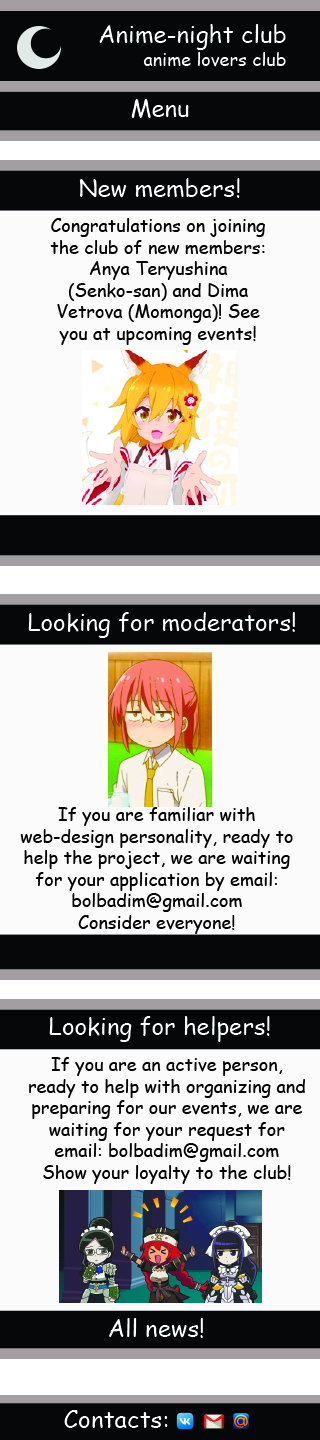
<style>
.page{position:relative;width:320px;height:1440px;background:#fbfbfb}
.page>*{position:absolute;margin:0}
.t1{font:24px "ComicSansMS";color:#ffffff}
.t2{font:18px "ComicSansMS";color:#ffffff}
.t3{font:18px "ComicSansMS";color:#000000}
</style>
<div class="page">
<p class="t1" style="left:99px;top:24px;width:187px;height:26px">Anime-night club</p>
<p class="t2" style="left:143px;top:52px;width:143px;height:15px">anime lovers club</p>
<p class="t1" style="left:131px;top:99px;width:58px;height:19px">Menu</p>
<p class="t1" style="left:79px;top:178px;width:161px;height:20px">New members!</p>
<p class="t3" style="left:50px;top:218px;width:215px;height:127px;text-align:center">Congratulations on joining the club of new members: Anya Teryushina (Senko-san) and Dima Vetrova (Momonga)! See you at upcoming events!</p>
<p class="t1" style="left:28px;top:612px;width:267px;height:26px">Looking for moderators!</p>
<p class="t3" style="left:20px;top:807px;width:273px;height:127px;text-align:center">If you are familiar with web-design personality, ready to help the project, we are waiting for your application by email: bolbadim@gmail.com<br>Consider everyone!</p>
<p class="t1" style="left:49px;top:1016px;width:221px;height:26px">Looking for helpers!</p>
<p class="t3" style="left:29px;top:1057px;width:276px;height:127px;text-align:center">If you are an active person, ready to help with organizing and preparing for our events, we are waiting for your request for email: bolbadim@gmail.com<br>Show your loyalty to the club!</p>
<p class="t1" style="left:109px;top:1318px;width:94px;height:20px">All news!</p>
<p class="t1" style="left:64px;top:1410px;width:104px;height:18px">Contacts:</p>
</div>
